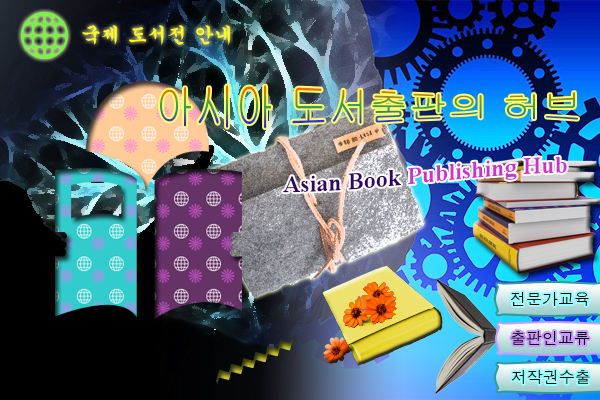
<style>
.page{position:relative;width:600px;height:400px}
.page>*{position:absolute;margin:0}
.t1{font:19.7px "Gungsuh";color:#ffff00}
.t2{font:23.9px "TimesNewRomanPS-BoldMT";color:#cc33cc}
.t3{font:23.9px "TimesNewRomanPS-BoldMT";color:#330066}
.t4{font:15.9px "Dotum";color:#000000}
.t5{font:16px "Dotum";color:#000000}
</style>
<div class="page">
<p class="t1" style="left:82px;top:25px;width:148px;height:20px">국제 도서전 안내</p>
<p class="t2" style="left:283px;top:156px;width:284px;height:37px"><span class="t3">Asian Book </span>Publishing Hub</p>
<p class="t4" style="left:510px;top:292px;width:79px;height:14px">전문가교육</p>
<p class="t4" style="left:511px;top:331px;width:79px;height:14px">출판인교류</p>
<p class="t5" style="left:511px;top:370px;width:79px;height:14px">저작권수출</p>
</div>
